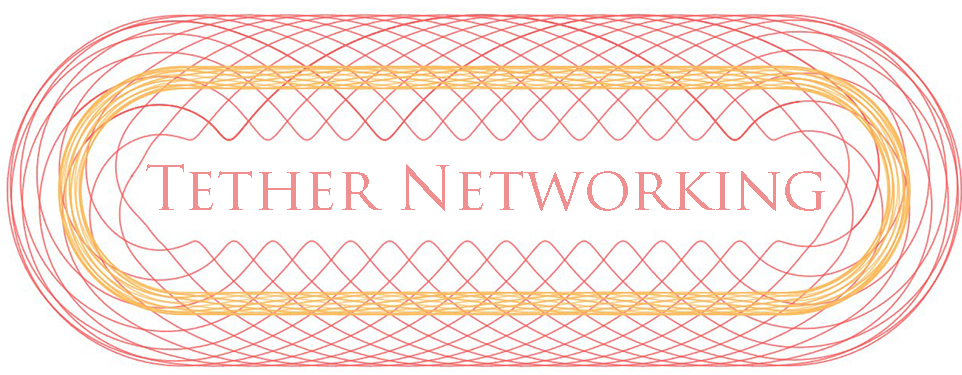
<style>
.page{position:relative;width:962px;height:375px;background:#ffffff}
.page>*{position:absolute;margin:0}
.t1{font:60.1px "TrajanPro-Regular";color:#f08f8f}
</style>
<div class="page">
<p class="t1" style="left:146px;top:164px;width:679px;height:47px">Tether Networking</p>
</div>
